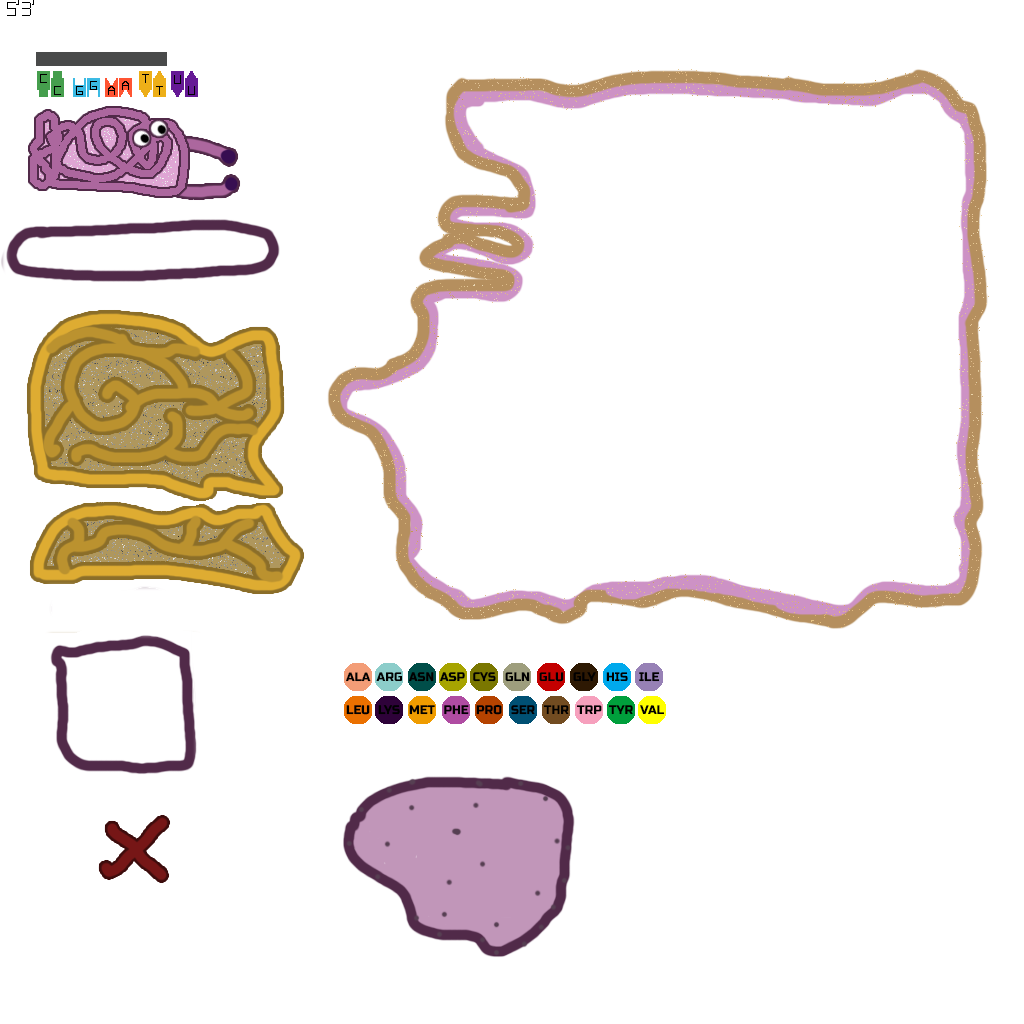
<style>
.page{position:relative;width:1024px;height:1024px;background:#ffffff}
.page>*{position:absolute;margin:0}
.t1{font:12px "RussoOne-Regular";color:#010101}
.t2{font:12.4px "RussoOne-Regular";color:#010101}
.t3{font:12.4px "RussoOne-Regular";color:#000000;scale:0.95 1}
.t4{font:12.4px "RussoOne-Regular";color:#000000;scale:0.96 1}
.t5{font:12.4px "RussoOne-Regular";color:#000000}
.t6{font:12.4px "RussoOne-Regular";color:#000000;scale:0.97 1}
</style>
<div class="page">
<p class="t1" style="left:346px;top:672px;width:25px;height:10px">ALA</p>
<p class="t2" style="left:376px;top:672px;width:26px;height:10px">ARG</p>
<p class="t3" style="left:409px;top:672px;width:25px;height:10px">ASN</p>
<p class="t4" style="left:440px;top:672px;width:25px;height:10px">ASP</p>
<p class="t3" style="left:473px;top:672px;width:23px;height:10px">CYS</p>
<p class="t5" style="left:505px;top:672px;width:25px;height:10px">GLN</p>
<p class="t5" style="left:539px;top:672px;width:25px;height:10px">GLU</p>
<p class="t5" style="left:573px;top:672px;width:23px;height:10px">GLY</p>
<p class="t5" style="left:606px;top:672px;width:22px;height:10px">HIS</p>
<p class="t6" style="left:639px;top:672px;width:21px;height:10px">ILE</p>
<p class="t6" style="left:346px;top:705px;width:24px;height:10px">LEU</p>
<p class="t6" style="left:378px;top:705px;width:22px;height:10px">LYS</p>
<p class="t5" style="left:409px;top:705px;width:26px;height:10px">MET</p>
<p class="t5" style="left:444px;top:705px;width:25px;height:10px">PHE</p>
<p class="t5" style="left:476px;top:704px;width:26px;height:11px">PRO</p>
<p class="t4" style="left:511px;top:705px;width:24px;height:10px">SER</p>
<p class="t5" style="left:544px;top:705px;width:25px;height:9px">THR</p>
<p class="t5" style="left:577px;top:705px;width:25px;height:9px">TRP</p>
<p class="t4" style="left:608px;top:705px;width:25px;height:10px">TYR</p>
<p class="t5" style="left:640px;top:705px;width:24px;height:9px">VAL</p>
</div>
